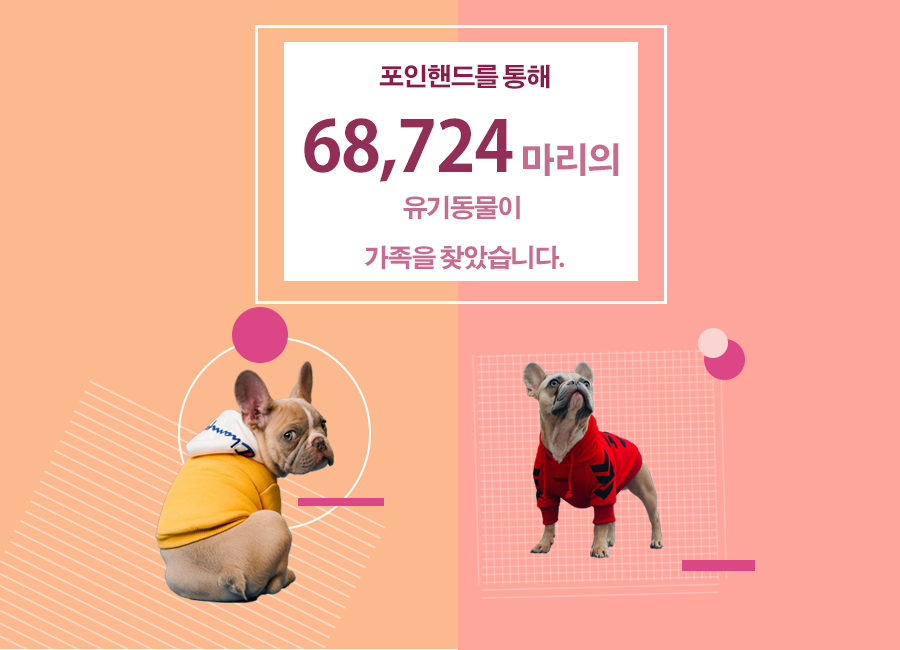
<style>
.page{position:relative;width:900px;height:650px;background:#fbb98d}
.page>*{position:absolute;margin:0}
.t1{font:25px "AdobeGothicStd-Bold";letter-spacing:-0.05em;color:#8c1a4a}
.t2{font:70px "AdobeGothicStd-Bold";letter-spacing:-0.02em;color:#932e57}
.t3{font:35px "AdobeGothicStd-Bold";letter-spacing:-0.05em;color:#c76c91}
.t4{font:25px/50px "AdobeGothicStd-Bold";letter-spacing:-0.05em;color:#c76c91}
</style>
<div class="page">
<p class="t1" style="left:379px;top:64px;width:171px;height:25px">포인핸드를 통해</p>
<p class="t2" style="left:304px;top:118px;width:209px;height:64px">68,724</p>
<p class="t3" style="left:523px;top:143px;width:96px;height:33px">마리의</p>
<p class="t4" style="left:364px;top:195px;width:200px;height:75px;text-align:center">유기동물이 <br>가족을 찾았습니다.</p>
</div>
